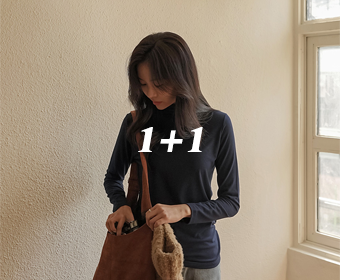
<style>
.page{position:relative;width:340px;height:280px}
.page>*{position:absolute;margin:0}
.t1{font:36px "Dutch801BT-ExtraBold";color:#ffffff;font-style:italic}
</style>
<div class="page">
<p class="t1" style="left:138px;top:127px;width:65px;height:25px">1+1</p>
</div>
